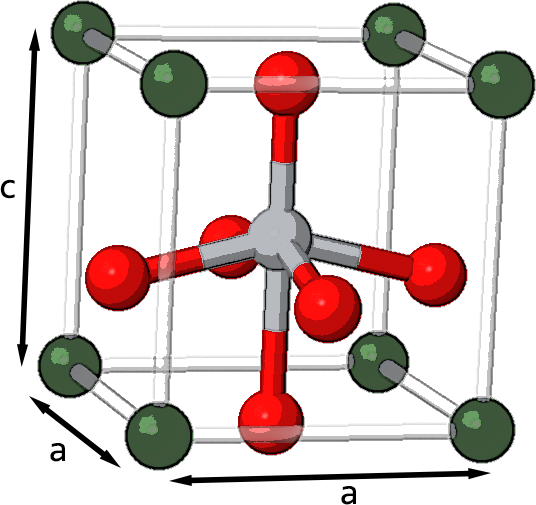
<style>
.page{position:relative;width:536px;height:505px;background:#ffffff}
.page>*{position:absolute;margin:0}
.t1{font:36px "Consolas";color:#000000}
</style>
<div class="page">
<p class="t1" style="left:0px;top:179px;width:15px;height:20px">c</p>
<p class="t1" style="left:50px;top:443px;width:15px;height:19px">a</p>
<p class="t1" style="left:341px;top:486px;width:15px;height:19px">a</p>
</div>
